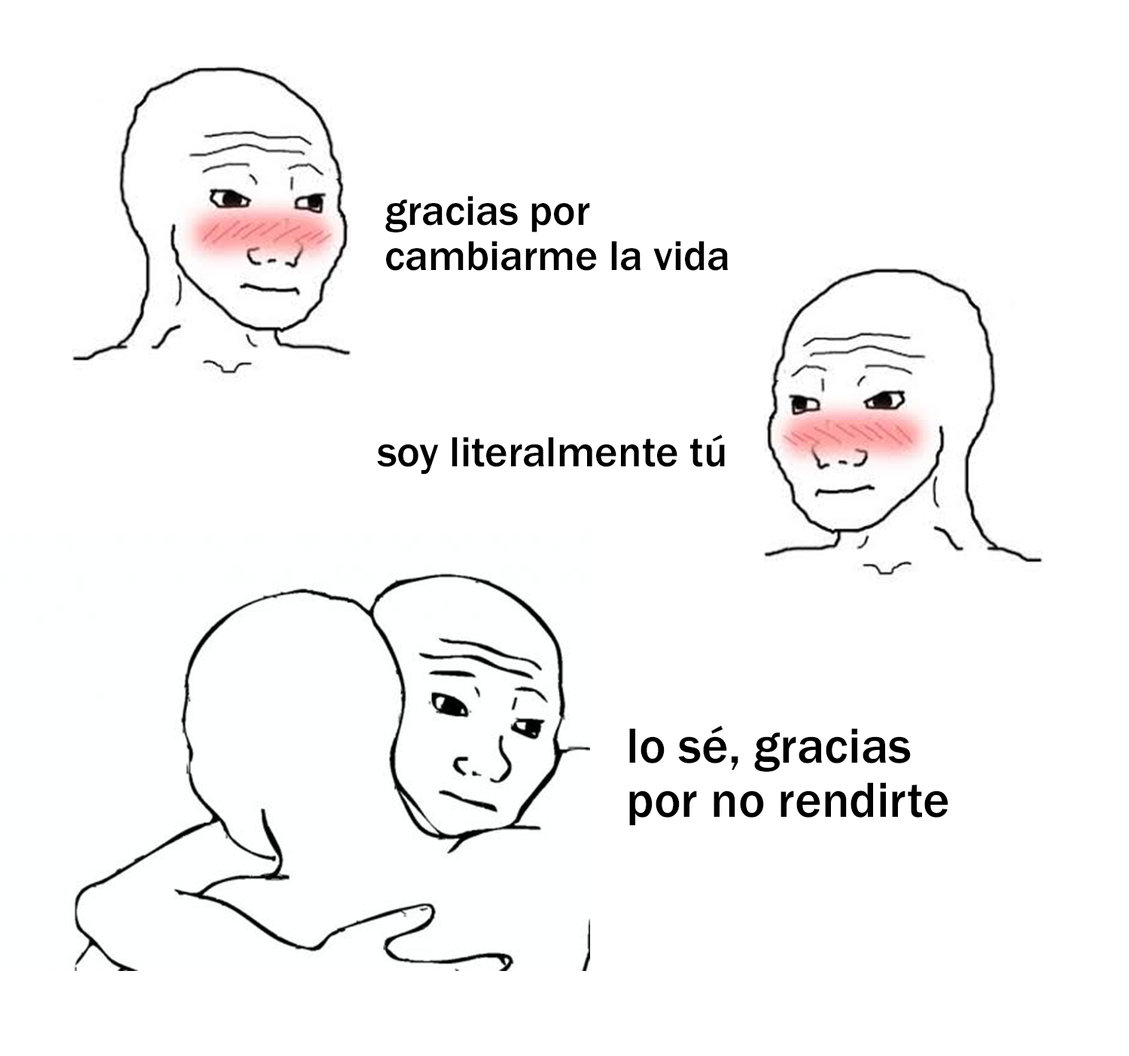
<style>
.page{position:relative;width:1129px;height:1056px;background:#ffffff}
.page>*{position:absolute;margin:0}
.t1{font:43.3px "FranklinGothic-Medium";color:#000000}
.t2{font:43.9px "FranklinGothic-Medium";color:#000000}
.t3{font:51.1px "FranklinGothic-Medium";color:#000000}
</style>
<div class="page">
<p class="t1" style="left:385px;top:196px;width:343px;height:75px">gracias por<br>cambiarme la vida</p>
<p class="t2" style="left:377px;top:434px;width:348px;height:41px">soy literalmente tú</p>
<p class="t3" style="left:629px;top:725px;width:319px;height:101px">lo sé, gracias<br>por no rendirte</p>
</div>
